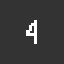
<style>
.page{position:relative;width:64px;height:64px;background:#333333}
.page>*{position:absolute;margin:0}
.t1{font:40.9px "Glasstown-NBP";letter-spacing:0.005em;color:#ffffff;font-weight:bold}
</style>
<div class="page">
<p class="t1" style="left:26px;top:20px;width:11px;height:24px">4</p>
</div>
